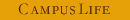
<style>
.page{position:relative;width:130px;height:20px;background:#e6a109}
.page>*{position:absolute;margin:0}
.t1{font:12.5px "Garamond";color:#4c290d}
.t2{font:16.7px "Garamond";color:#4c290d}
</style>
<div class="page">
<p class="t1" style="left:18px;top:3px;width:92px;height:12px"><span class="t2">C  </span>A M  P U S <span class="t2">L </span>I F E</p>
</div>
